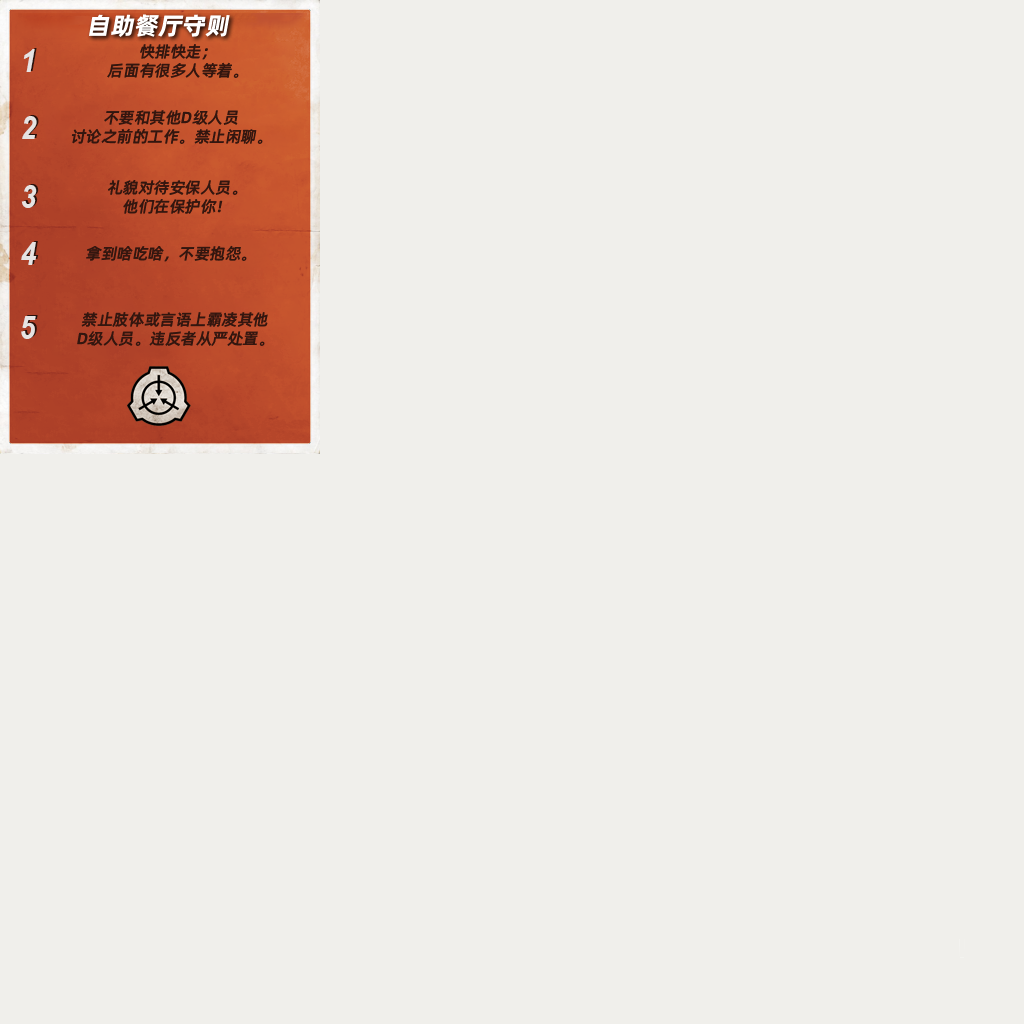
<style>
.page{position:relative;width:1024px;height:1024px;background:#f0efeb}
.page>*{position:absolute;margin:0}
.t1{font:24.1px "AlibabaPuHuiTiB";color:#ffffff;font-style:italic}
.t2{font:15.8px/19.1px "AlibabaPuHuiTiM";color:#33160f;font-style:italic}
.t3{font:15.8px "AlibabaPuHuiTiM";color:#33160f;font-style:italic}
</style>
<div class="page">
<p class="t1" style="left:89px;top:14px;width:141px;height:23px">自助餐厅守则</p>
<p class="t2" style="left:107px;top:44px;width:132px;height:34px;text-align:center">快排快走；<br>后面有很多人等着。</p>
<p class="t2" style="left:71px;top:110px;width:192px;height:34px;text-align:center">不要和其他D级人员<br>讨论之前的工作。禁止闲聊。</p>
<p class="t2" style="left:108px;top:180px;width:130px;height:34px;text-align:center">礼貌对待安保人员。<br>他们在保护你！</p>
<p class="t3" style="left:86px;top:245px;width:161px;height:17px">拿到啥吃啥，不要抱怨。</p>
<p class="t2" style="left:77px;top:312px;width:191px;height:34px;text-align:center">禁止肢体或言语上霸凌其他<br>D级人员。违反者从严处置。</p>
</div>
